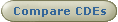
<style>
.page{position:relative;width:118px;height:22px}
.page>*{position:absolute;margin:0}
.t1{font:11px "Verdana-Bold";color:#336699}
</style>
<div class="page">
<p class="t1" style="left:14px;top:7px;width:92px;height:10px">Compare CDEs</p>
</div>
